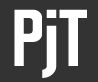
<style>
.page{position:relative;width:98px;height:82px;background:#333333}
.page>*{position:absolute;margin:0}
.t1{font:80px "OSP-DIN";color:#ffffff;scale:1.14 1}
</style>
<div class="page">
<p class="t1" style="left:14px;top:9px;width:73px;height:69px">PjT</p>
</div>
